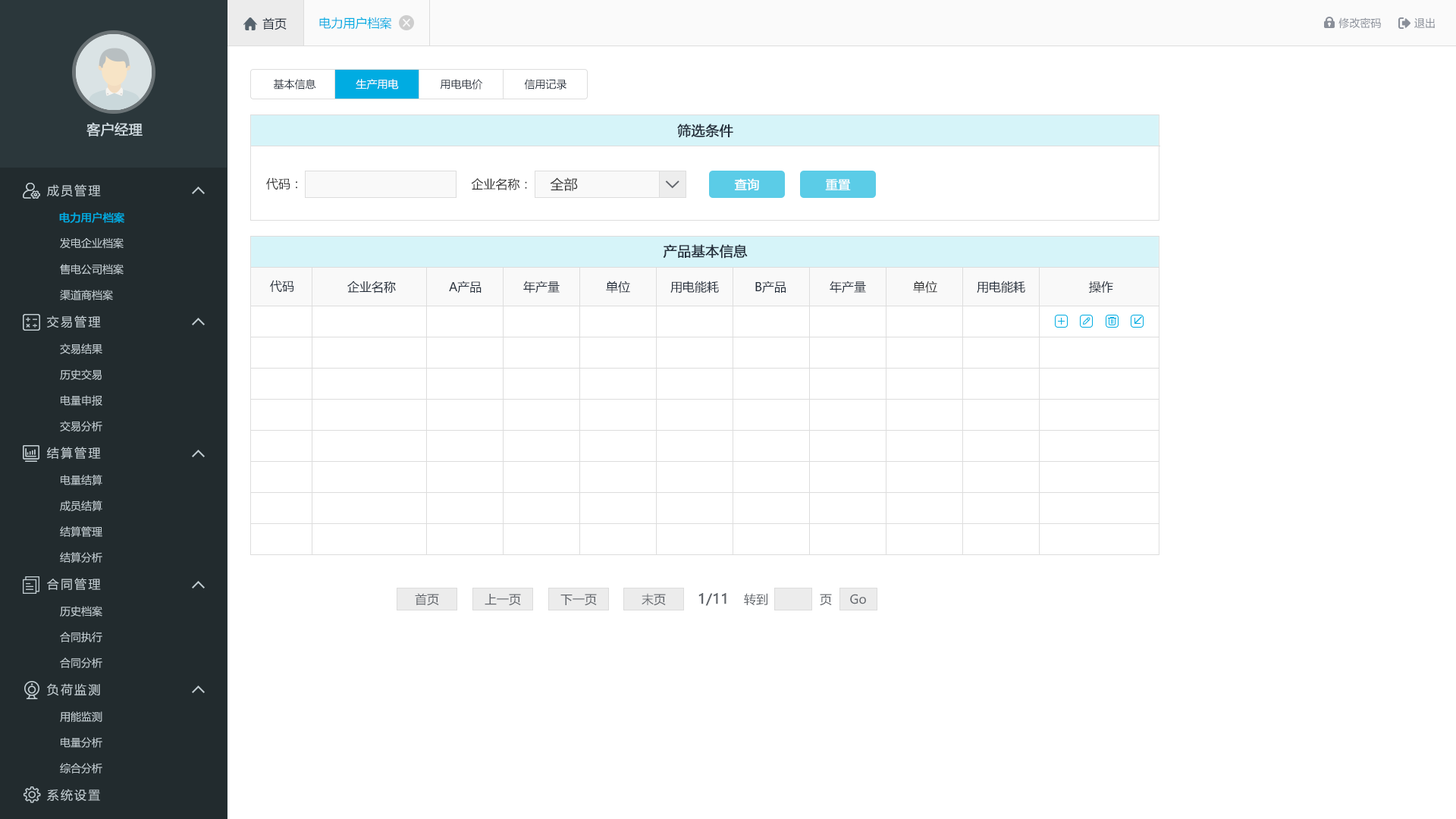
<style>
.page{position:relative;width:1456px;height:819px;background:#ffffff}
.page>*{position:absolute;margin:0}
.t1{font:12.1px "MicrosoftYaHei";color:#242e3b}
.t2{font:12.1px "MicrosoftYaHei";color:#00ace2}
.t3{font:10.6px "MicrosoftYaHei";color:#8a8f99}
.t4{font:10.6px "MicrosoftYaHei";color:#242e3b}
.t5{font:10.6px "MicrosoftYaHei";color:#ffffff}
.t6{font:13.6px "MicrosoftYaHei";color:#d1dce2;font-weight:bold}
.t7{font:13.6px "MicrosoftYaHei";color:#242e3b;font-weight:bold}
.t8{font:12.1px "MicrosoftYaHei";letter-spacing:0.14em;color:#c2cdd2}
.t9{font:12.1px "MicrosoftYaHei";color:#333333}
.t10{font:13.6px "MicrosoftYaHei";color:#333333}
.t11{font:12.1px "MicrosoftYaHei";color:#ffffff;font-weight:bold}
.t12{font:10.6px "MicrosoftYaHei";color:#00ace2;font-weight:bold}
.t13{font:10.6px "MicrosoftYaHei";color:#c2cdd2}
.t14{font:12.1px "MicrosoftYaHei";color:#61656b}
.t15{font:13.6px "MicrosoftYaHei";color:#61656b;font-weight:bold}
</style>
<div class="page">
<p class="t1" style="left:262px;top:17px;width:25px;height:13px">首页</p>
<p class="t2" style="left:319px;top:17px;width:73px;height:13px">电力用户档案</p>
<p class="t3" style="left:1338px;top:17px;width:43px;height:12px">修改密码</p>
<p class="t3" style="left:1414px;top:17px;width:21px;height:11px">退出</p>
<p class="t4" style="left:273px;top:79px;width:43px;height:10px">基本信息</p>
<p class="t5" style="left:356px;top:79px;width:43px;height:10px">生产用电</p>
<p class="t4" style="left:440px;top:79px;width:43px;height:10px">用电电价</p>
<p class="t4" style="left:524px;top:79px;width:42px;height:10px">信用记录</p>
<p class="t6" style="left:86px;top:122px;width:57px;height:14px">客户经理</p>
<p class="t7" style="left:677px;top:124px;width:56px;height:14px">筛选条件</p>
<p class="t8" style="left:47px;top:184px;width:54px;height:13px">成员管理</p>
<p class="t9" style="left:266px;top:177px;width:31px;height:13px">代码：</p>
<p class="t9" style="left:471px;top:178px;width:56px;height:12px">企业名称：</p>
<p class="t10" style="left:550px;top:177px;width:28px;height:14px">全部</p>
<p class="t11" style="left:734px;top:178px;width:25px;height:12px">查询</p>
<p class="t11" style="left:825px;top:179px;width:26px;height:11px">重置</p>
<p class="t12" style="left:59px;top:212px;width:65px;height:11px">电力用户档案</p>
<p class="t13" style="left:60px;top:237px;width:64px;height:12px">发电企业档案</p>
<p class="t7" style="left:663px;top:244px;width:85px;height:15px">产品基本信息</p>
<p class="t13" style="left:60px;top:264px;width:64px;height:11px">售电公司档案</p>
<p class="t1" style="left:270px;top:280px;width:24px;height:12px">代码</p>
<p class="t1" style="left:347px;top:281px;width:49px;height:12px">企业名称</p>
<p class="t1" style="left:449px;top:281px;width:33px;height:12px">A产品</p>
<p class="t1" style="left:523px;top:281px;width:37px;height:12px">年产量</p>
<p class="t1" style="left:606px;top:281px;width:24px;height:12px">单位</p>
<p class="t1" style="left:670px;top:281px;width:49px;height:12px">用电能耗</p>
<p class="t1" style="left:755px;top:281px;width:31px;height:12px">B产品</p>
<p class="t1" style="left:830px;top:281px;width:36px;height:12px">年产量</p>
<p class="t9" style="left:913px;top:281px;width:24px;height:12px">单位</p>
<p class="t1" style="left:977px;top:281px;width:48px;height:12px">用电能耗</p>
<p class="t1" style="left:1089px;top:281px;width:24px;height:12px">操作</p>
<p class="t13" style="left:60px;top:290px;width:53px;height:10px">渠道商档案</p>
<p class="t8" style="left:47px;top:315px;width:54px;height:13px">交易管理</p>
<p class="t13" style="left:60px;top:344px;width:42px;height:10px">交易结果</p>
<p class="t13" style="left:60px;top:369px;width:42px;height:11px">历史交易</p>
<p class="t13" style="left:61px;top:395px;width:41px;height:11px">电量申报</p>
<p class="t13" style="left:60px;top:421px;width:42px;height:10px">交易分析</p>
<p class="t8" style="left:47px;top:447px;width:54px;height:13px">结算管理</p>
<p class="t13" style="left:61px;top:475px;width:41px;height:10px">电量结算</p>
<p class="t13" style="left:60px;top:500px;width:42px;height:11px">成员结算</p>
<p class="t13" style="left:60px;top:526px;width:42px;height:11px">结算管理</p>
<p class="t13" style="left:60px;top:552px;width:42px;height:11px">结算分析</p>
<p class="t8" style="left:47px;top:578px;width:54px;height:12px">合同管理</p>
<p class="t14" style="left:415px;top:593px;width:24px;height:13px">首页</p>
<p class="t14" style="left:485px;top:594px;width:36px;height:12px">上一页</p>
<p class="t14" style="left:560px;top:594px;width:37px;height:12px">下一页</p>
<p class="t14" style="left:642px;top:593px;width:24px;height:13px">末页</p>
<p class="t15" style="left:698px;top:593px;width:28px;height:13px">1/11</p>
<p class="t14" style="left:744px;top:593px;width:23px;height:12px">转到</p>
<p class="t14" style="left:820px;top:594px;width:12px;height:12px">页</p>
<p class="t14" style="left:850px;top:594px;width:16px;height:10px">Go</p>
<p class="t13" style="left:60px;top:606px;width:42px;height:11px">历史档案</p>
<p class="t13" style="left:60px;top:632px;width:42px;height:10px">合同执行</p>
<p class="t13" style="left:60px;top:657px;width:42px;height:11px">合同分析</p>
<p class="t8" style="left:47px;top:683px;width:53px;height:13px">负荷监测</p>
<p class="t13" style="left:60px;top:711px;width:42px;height:11px">用能监测</p>
<p class="t13" style="left:61px;top:737px;width:41px;height:11px">电量分析</p>
<p class="t13" style="left:60px;top:763px;width:42px;height:10px">综合分析</p>
<p class="t8" style="left:47px;top:789px;width:53px;height:13px">系统设置</p>
</div>
